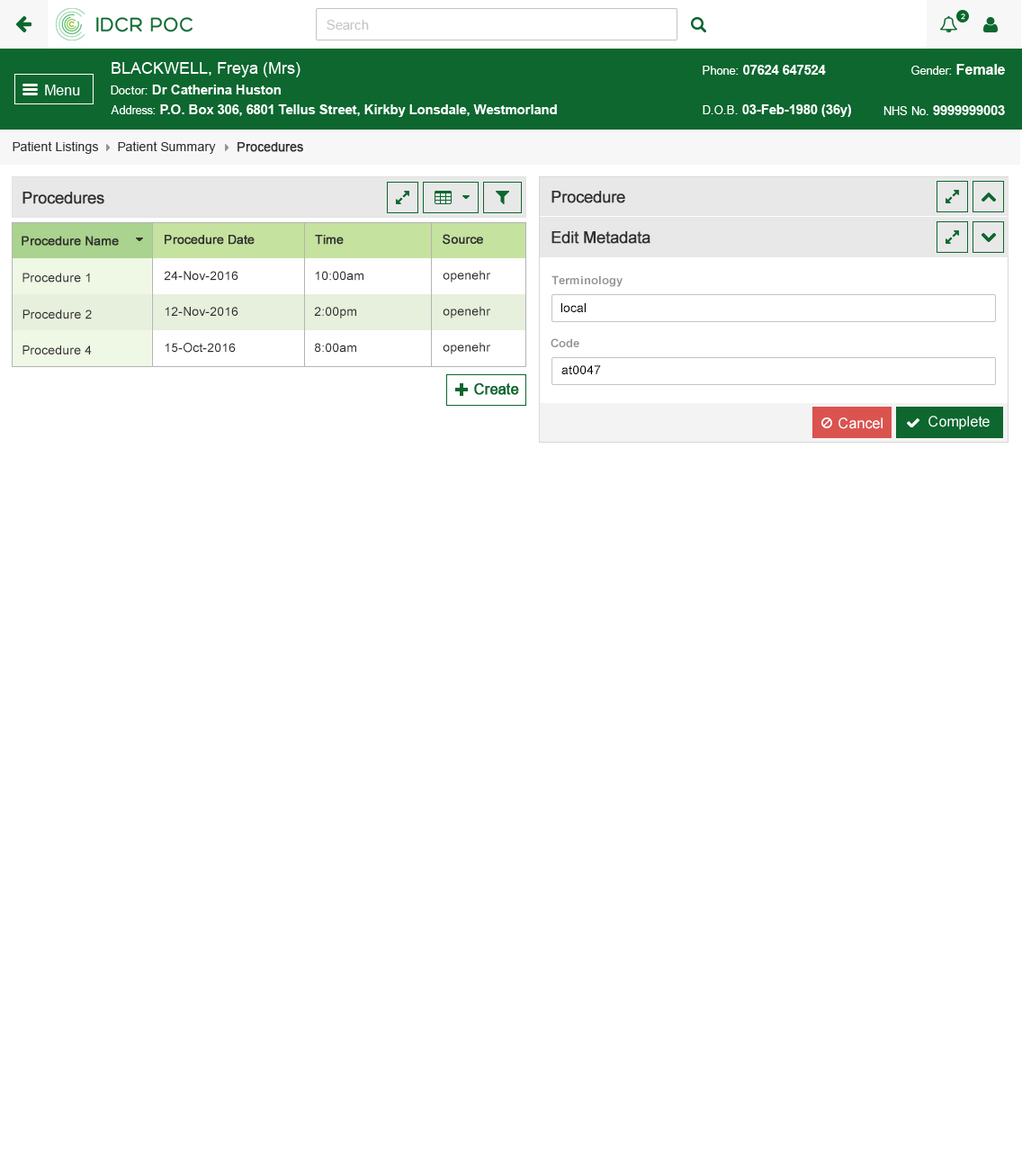
<style>
.page{position:relative;width:1022px;height:1166px;background:#ffffff}
.page>*{position:absolute;margin:0}
.t1{font:12.6px "ArialMT";color:#313131}
.t2{font:12.6px "ArialMT";color:#313131;font-weight:bold}
.t3{font:16.2px "ArialMT";color:#303030;font-weight:bold}
.t4{font:12.6px "ArialMT";color:#303030;font-weight:bold}
.t5{font:12.6px "ArialMT";color:#303030}
.t6{font:11.7px "Arial-BoldMT";color:#959595}
.t7{font:12.6px "ArialMT";color:#000000}
</style>
<div class="page">
<p class="t1" style="left:13px;top:141px;width:86px;height:13px">Patient Listings</p>
<p class="t1" style="left:118px;top:141px;width:98px;height:13px">Patient Summary</p>
<p class="t2" style="left:238px;top:142px;width:65px;height:10px">Procedures</p>
<p class="t3" style="left:22px;top:192px;width:82px;height:12px">Procedures</p>
<p class="t3" style="left:552px;top:191px;width:73px;height:12px">Procedure</p>
<p class="t4" style="left:443px;top:234px;width:40px;height:11px">Source</p>
<p class="t3" style="left:552px;top:231px;width:99px;height:13px">Edit Metadata</p>
<p class="t4" style="left:22px;top:236px;width:97px;height:10px">Procedure Name</p>
<p class="t4" style="left:165px;top:235px;width:90px;height:10px">Procedure Date</p>
<p class="t4" style="left:315px;top:235px;width:29px;height:10px">Time</p>
<p class="t5" style="left:443px;top:270px;width:48px;height:13px">openehr</p>
<p class="t5" style="left:22px;top:273px;width:68px;height:10px">Procedure 1</p>
<p class="t5" style="left:164px;top:271px;width:74px;height:10px">24-Nov-2016</p>
<p class="t5" style="left:315px;top:271px;width:49px;height:10px">10:00am</p>
<p class="t6" style="left:552px;top:275px;width:71px;height:12px">Terminology</p>
<p class="t5" style="left:443px;top:306px;width:48px;height:13px">openehr</p>
<p class="t7" style="left:561px;top:303px;width:25px;height:9px">local</p>
<p class="t5" style="left:22px;top:310px;width:70px;height:9px">Procedure 2</p>
<p class="t5" style="left:165px;top:307px;width:73px;height:9px">12-Nov-2016</p>
<p class="t5" style="left:314px;top:307px;width:42px;height:12px">2:00pm</p>
<p class="t5" style="left:443px;top:342px;width:48px;height:13px">openehr</p>
<p class="t6" style="left:551px;top:338px;width:29px;height:9px">Code</p>
<p class="t5" style="left:22px;top:346px;width:70px;height:9px">Procedure 4</p>
<p class="t5" style="left:165px;top:343px;width:71px;height:10px">15-Oct-2016</p>
<p class="t5" style="left:315px;top:343px;width:41px;height:10px">8:00am</p>
<p class="t7" style="left:562px;top:365px;width:39px;height:9px">at0047</p>
</div>
